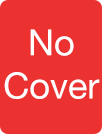
<style>
.page{position:relative;width:102px;height:134px;background:#eb3231}
.page>*{position:absolute;margin:0}
.t1{font:36px "HelveticaNeue";color:#ffffff}
</style>
<div class="page">
<p class="t1" style="left:4px;top:29px;width:96px;height:70px;text-align:center">No<br>Cover</p>
</div>
